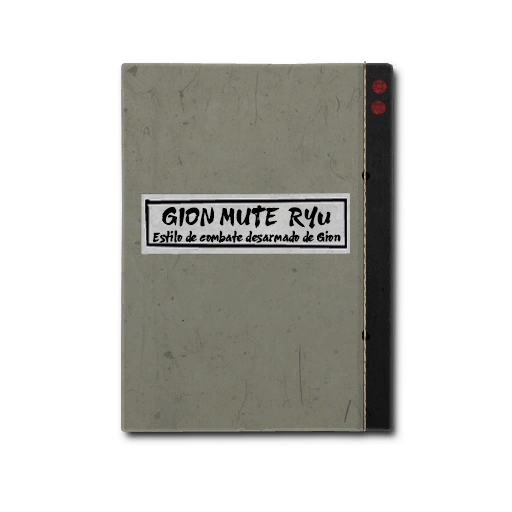
<style>
.page{position:relative;width:512px;height:512px;background:#ffffff}
.page>*{position:absolute;margin:0}
.t1{font:20px "Amanojaku";color:#000000;text-transform:uppercase;font-weight:bold}
.t2{font:10px "Amanojaku";letter-spacing:0.02em;color:#000000;font-weight:bold}
</style>
<div class="page">
<p class="t1" style="left:162px;top:205px;width:169px;height:24px">Gion Mute  ryū</p>
<p class="t2" style="left:153px;top:230px;width:188px;height:13px">Estilo de combate desarmado de Gion</p>
</div>
